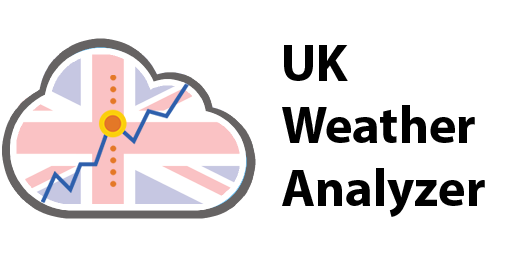
<style>
.page{position:relative;width:512px;height:256px;background:#ffffff}
.page>*{position:absolute;margin:0}
.t1{font:52px "MyriadPro-Bold";color:#000000}
</style>
<div class="page">
<p class="t1" style="left:282px;top:45px;width:203px;height:172px">UK<br>Weather<br>Analyzer</p>
</div>
